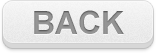
<style>
.page{position:relative;width:156px;height:53px}
.page>*{position:absolute;margin:0}
.t1{font:32px "Arial-BoldMT";color:#959595}
</style>
<div class="page">
<p class="t1" style="left:34px;top:10px;width:90px;height:24px">BACK</p>
</div>
